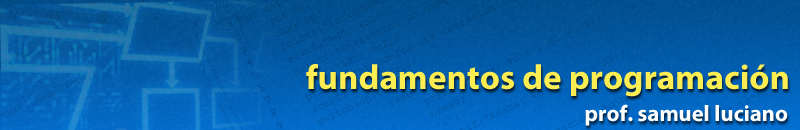
<style>
.page{position:relative;width:800px;height:130px}
.page>*{position:absolute;margin:0}
.t1{font:35px "MyriadPro-Bold";color:#fbed52}
.t2{font:22.5px "MyriadPro-Bold";color:#fefefe}
</style>
<div class="page">
<p class="t1" style="left:306px;top:64px;width:482px;height:33px">fundamentos de programación</p>
<p class="t2" style="left:585px;top:104px;width:203px;height:22px">prof. samuel luciano</p>
</div>
